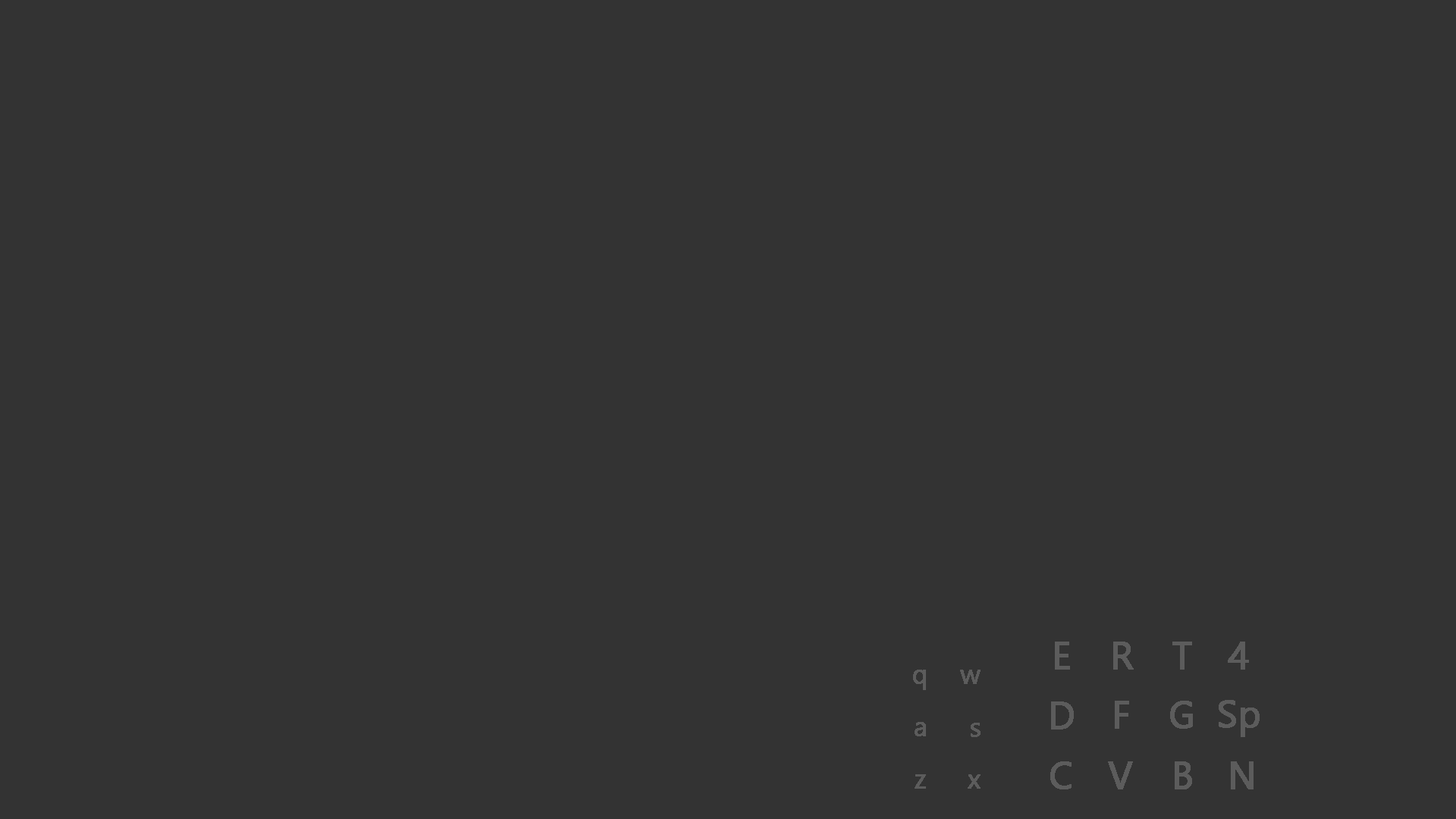
<style>
.page{position:relative;width:1456px;height:819px;background:#333333}
.page>*{position:absolute;margin:0}
.t1{font:37.9px "SegoeUI";color:#5c5c5c;font-weight:bold}
.t2{font:27.3px "SegoeUI";color:#5c5c5c;font-weight:bold}
</style>
<div class="page">
<p class="t1" style="left:1055px;top:642px;width:15px;height:28px">E</p>
<p class="t1" style="left:1113px;top:642px;width:21px;height:28px">R</p>
<p class="t1" style="left:1172px;top:642px;width:20px;height:28px">T</p>
<p class="t1" style="left:1228px;top:642px;width:21px;height:28px">4</p>
<p class="t2" style="left:913px;top:670px;width:13px;height:20px">q</p>
<p class="t2" style="left:960px;top:670px;width:21px;height:14px">w</p>
<p class="t1" style="left:1051px;top:701px;width:23px;height:29px">D</p>
<p class="t1" style="left:1115px;top:701px;width:14px;height:28px">F</p>
<p class="t1" style="left:1170px;top:701px;width:23px;height:28px">G</p>
<p class="t1" style="left:1219px;top:700px;width:41px;height:37px">Sp</p>
<p class="t2" style="left:915px;top:722px;width:11px;height:14px">a</p>
<p class="t2" style="left:971px;top:723px;width:10px;height:14px">s</p>
<p class="t1" style="left:1050px;top:761px;width:22px;height:28px">C</p>
<p class="t1" style="left:1108px;top:761px;width:25px;height:28px">V</p>
<p class="t1" style="left:1175px;top:761px;width:17px;height:28px">B</p>
<p class="t1" style="left:1231px;top:761px;width:23px;height:28px">N</p>
<p class="t2" style="left:915px;top:774px;width:11px;height:15px">z</p>
<p class="t2" style="left:968px;top:774px;width:13px;height:15px">x</p>
</div>
